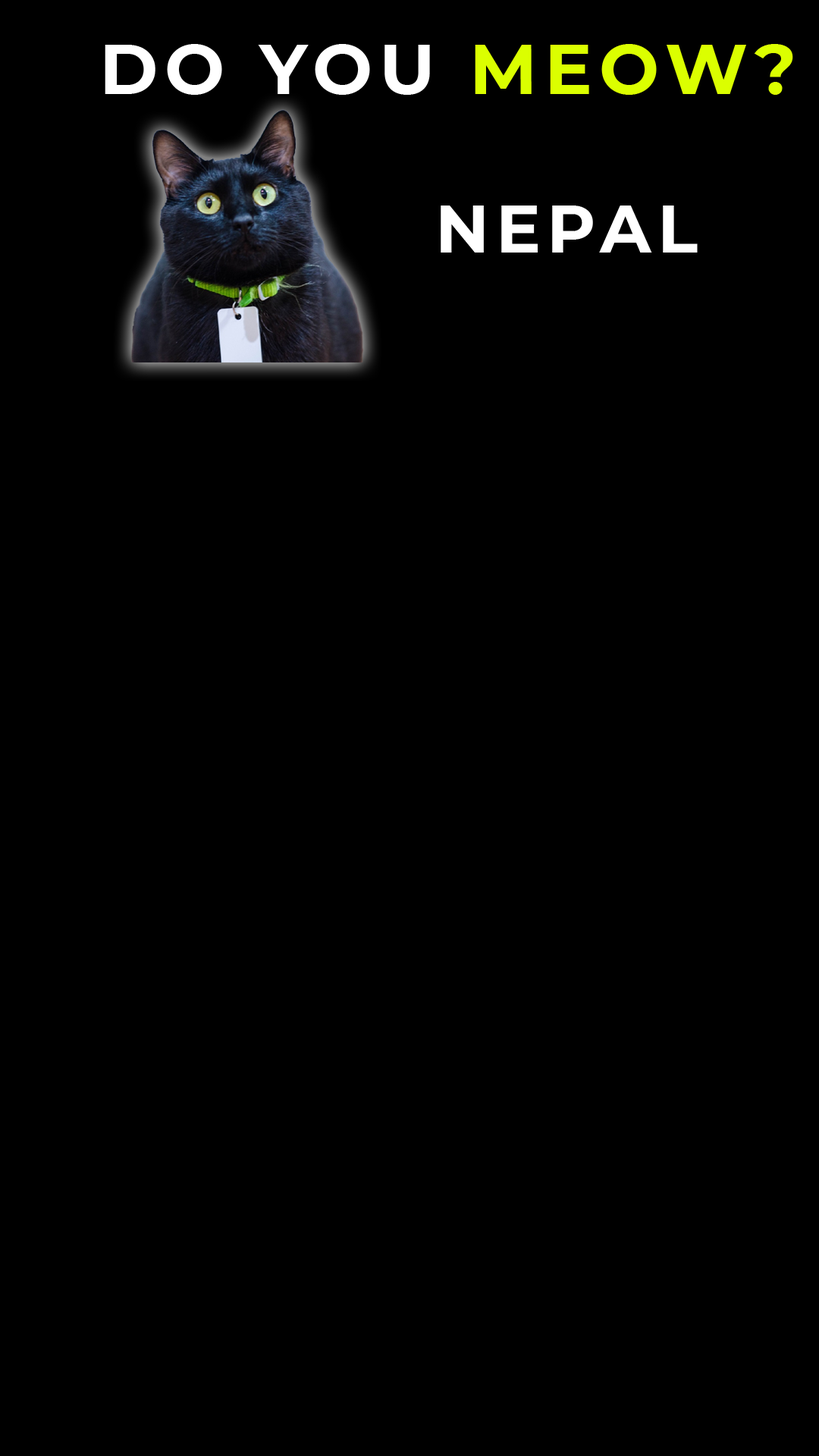
<style>
.page{position:relative;width:819px;height:1456px;background:#000000}
.page>*{position:absolute;margin:0}
.t1{font:71.1px "Montserrat-Bold";letter-spacing:0.1em;color:#ffffff}
.t2{font:71.1px "Montserrat-Bold";letter-spacing:0.1em;color:#dbff00}
.t3{font:66.8px "Montserrat-Bold";letter-spacing:0.1em;color:#ffffff}
</style>
<div class="page">
<p class="t1" style="left:105px;top:44px;width:688px;height:51px">DO YOU <span class="t2">MEOW?</span></p>
<p class="t3" style="left:441px;top:206px;width:257px;height:47px">NEPAL</p>
</div>
